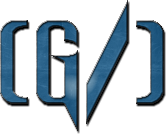
<style>
.page{position:relative;width:166px;height:134px;background:#ffffff}
.page>*{position:absolute;margin:0}
.t1{font:112px "Spinebiting"}
</style>
<div class="page">
<p class="t1" style="left:0px;top:0px;width:164px;height:131px">&lt;G/&gt;</p>
</div>
